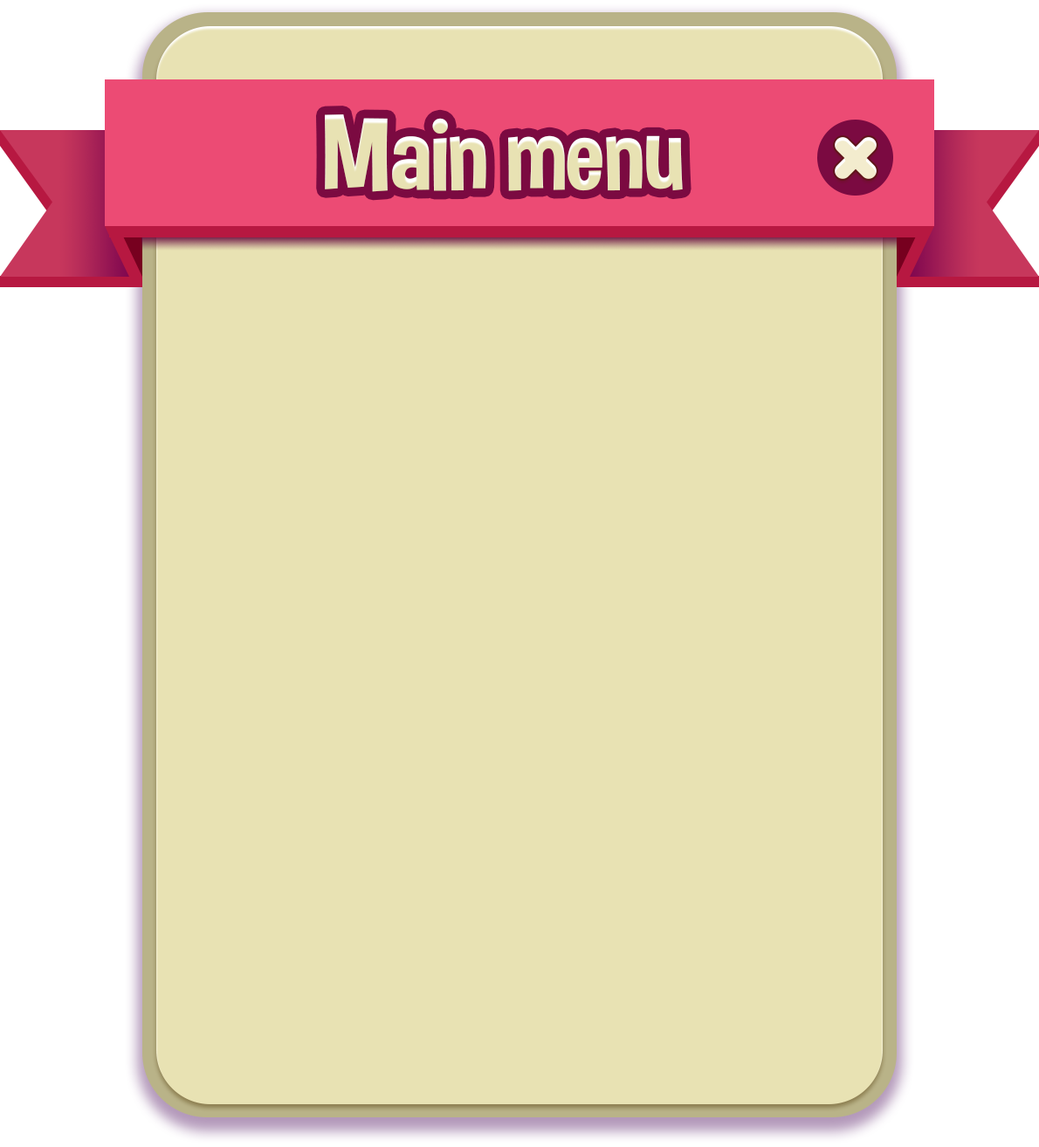
<style>
.page{position:relative;width:1039px;height:1147px;background:#e8e2b3}
.page>*{position:absolute;margin:0}
.t1{font:104.8px "DimboRegular";color:#e8e2b3}
</style>
<div class="page">
<p class="t1" style="left:325px;top:114px;width:358px;height:78px">Main menu</p>
</div>
